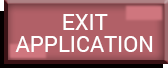
<style>
.page{position:relative;width:168px;height:68px;background:#b16067}
.page>*{position:absolute;margin:0}
.t1{font:22px/22px "Roboto-Regular";color:#ffffff}
</style>
<div class="page">
<p class="t1" style="left:15px;top:14px;width:138px;height:38px;text-align:center">EXIT<br>APPLICATION</p>
</div>
